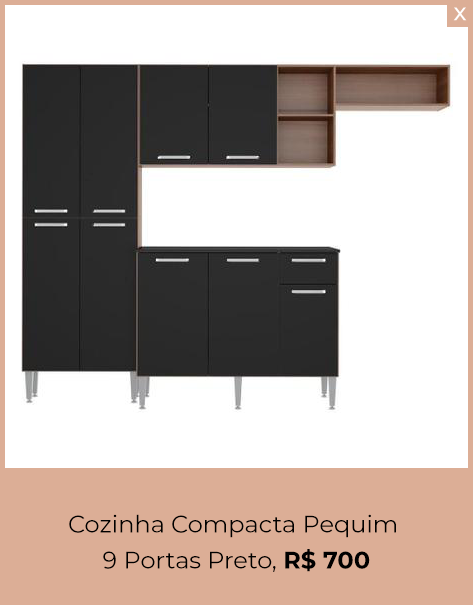
<style>
.page{position:relative;width:473px;height:605px;background:#ffffff}
.page>*{position:absolute;margin:0}
.t1{font:24px/36px "Montserrat-Regular";color:#000000}
.t2{font:24px/36px "Montserrat-Bold";color:#000000}
</style>
<div class="page">
<p class="t1" style="left:69px;top:514px;width:327px;height:58px;text-align:center">Cozinha Compacta Pequim <br>9 Portas Preto, <span class="t2">R$ 700</span></p>
</div>
